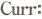
<style>
.page{position:relative;width:42px;height:19px;background:#ffffff}
.page>*{position:absolute;margin:0}
.t1{font:18px "RyuminPro-ExBold";letter-spacing:-0.08em;color:#5e574f}
</style>
<div class="page">
<p class="t1" style="left:0px;top:1px;width:37px;height:15px">Curr</p>
</div>
